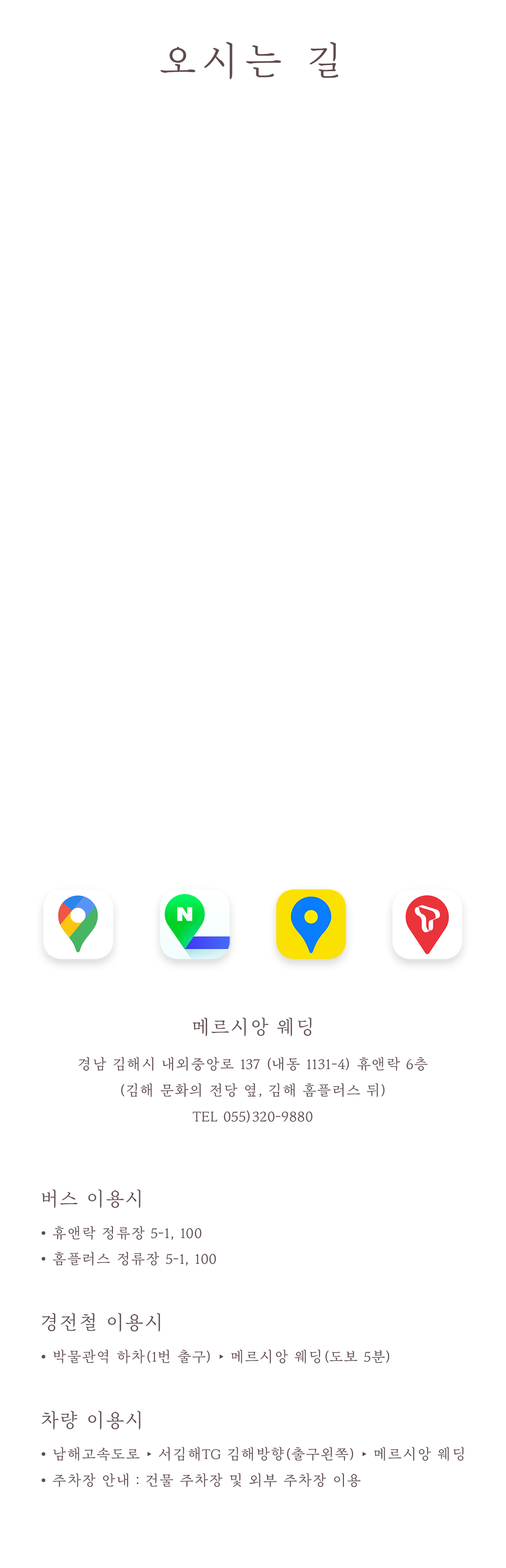
<style>
.page{position:relative;width:506px;height:1568px;background:#ffffff}
.page>*{position:absolute;margin:0}
.t1{font:39px "MapoGoldenPier";letter-spacing:0.1em;color:#5f4b4b}
.t2{font:14.6px/26px "MapoGoldenPier";color:#5f4b4b}
.t3{font:19.5px/26px "MapoGoldenPier";color:#5f4b4b}
.t4{font:14.6px/32.5px "MapoGoldenPier";color:#5f4b4b}
</style>
<div class="page">
<p class="t1" style="left:160px;top:42px;width:178px;height:38px">오시는 길</p>
<p class="t2" style="left:79px;top:1017px;width:348px;height:106px;text-align:center"><span class="t3">메르시앙 웨딩<br><br></span>경남 김해시 내외중앙로 137 (내동 1131-4) 휴앤락 6층<br>(김해 문화의 전당 옆, 김해 홈플러스 뒤)<br>TEL 055)320-9880</p>
<p class="t4" style="left:41px;top:1189px;width:423px;height:298px"><span class="t3">버스 이용시<br></span>• 휴앤락 정류장 5-1, 100<br><span class="t2">• 홈플러스 정류장 5-1, 100<br><br></span><span class="t3">경전철 이용시<br></span>• 박물관역 하차(1번 출구) ‣ 메르시앙 웨딩(도보 5분)<br><br><span class="t3">차량 이용시<br></span>• 남해고속도로 ‣ 서김해TG 김해방향(출구왼쪽) ‣ 메르시앙 웨딩<br><span class="t2">• 주차장 안내 : 건물 주차장 및 외부 주차장 이용</span></p>
</div>
